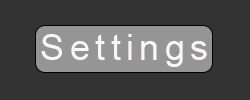
<style>
.page{position:relative;width:250px;height:100px;background:#333333}
.page>*{position:absolute;margin:0}
.t1{font:36px "ArialMT";letter-spacing:0.15em;color:#faf5f7}
</style>
<div class="page">
<p class="t1" style="left:41px;top:34px;width:166px;height:33px">Settings</p>
</div>
